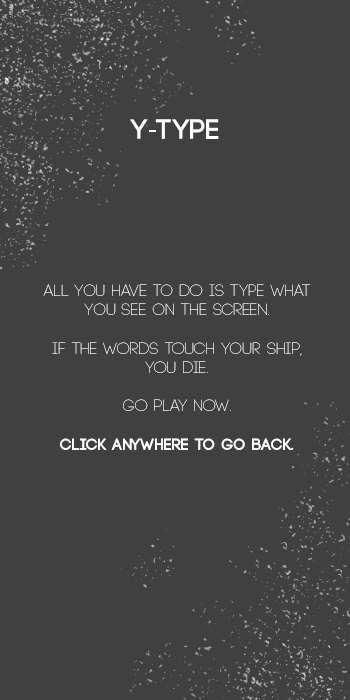
<style>
.page{position:relative;width:350px;height:700px;background:#404040}
.page>*{position:absolute;margin:0}
.t1{font:28px "Code-Bold";letter-spacing:0.025em;color:#fefefe}
.t2{font:28px "MyriadPro-Regular";letter-spacing:0.025em;color:#fefefe}
.t3{font:16px "Code-Light";letter-spacing:0.025em;color:#ffffff}
.t4{font:16px "Code-Bold";letter-spacing:0.025em;color:#ffffff}
</style>
<div class="page">
<p class="t1" style="left:130px;top:119px;width:89px;height:20px">Y<span class="t2">-</span>Type</p>
<p class="t3" style="left:43px;top:284px;width:268px;height:166px;text-align:center">All you have to do is type what you see on the screen.<br><br>If the words touch your ship, you die.<br><br>Go play now.<br><br><span class="t4">Click anywhere to go back.</span></p>
</div>
